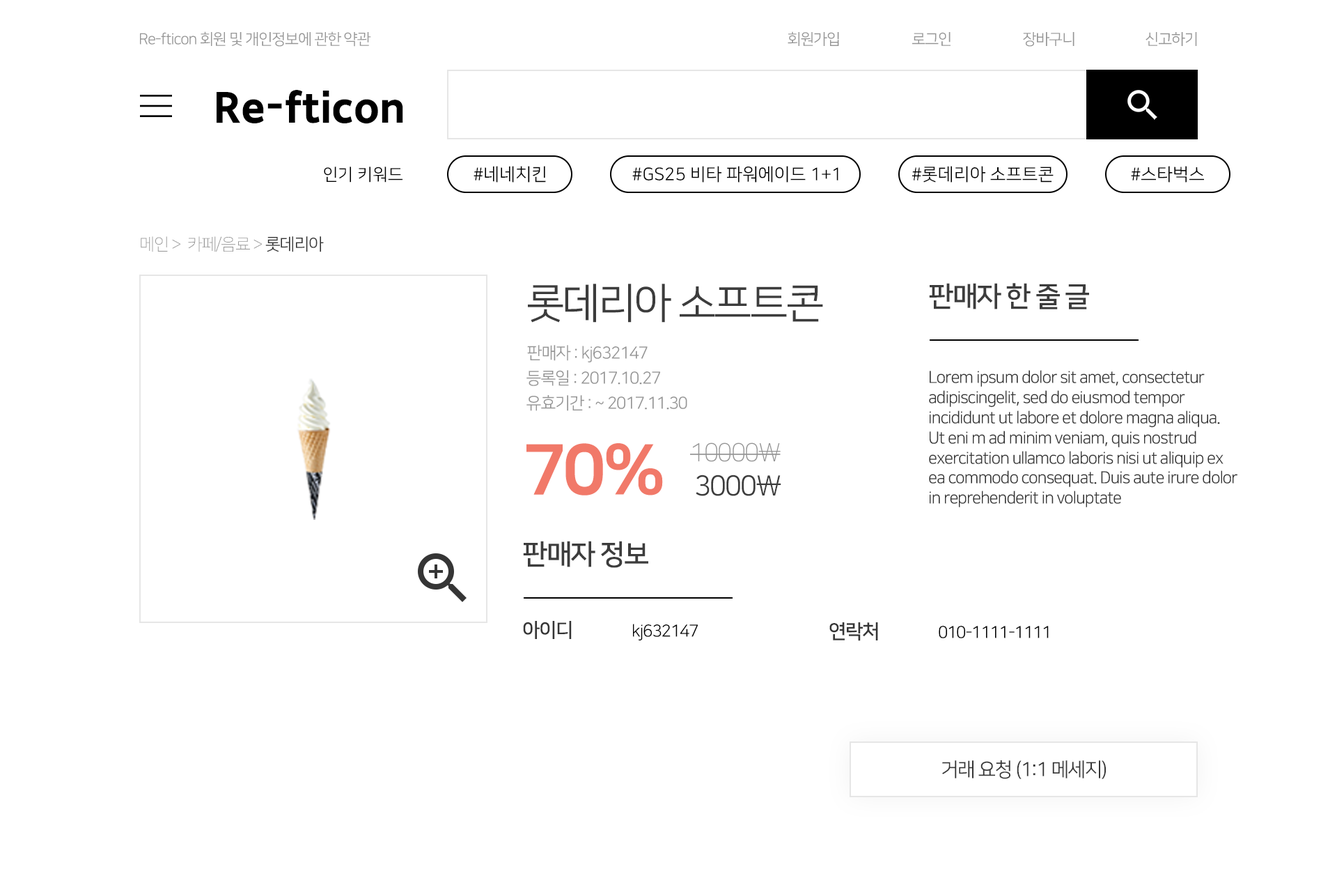
<style>
.page{position:relative;width:1337px;height:892px;background:#ffffff}
.page>*{position:absolute;margin:0}
.t1{font:15.3px "NanumSquareOTFR";letter-spacing:-0.05em;color:#959595}
.t2{font:41.8px "SDGothicNeoc-gExBd";color:#000000}
.t3{font:16.7px "NanumSquareOTFR";color:#000000}
.t4{font:17.6px "NanumSquareOTFR";color:#000000}
.t5{font:16.7px "NanumSquareOTFL";letter-spacing:-0.05em;color:#959595}
.t6{font:16.7px "NanumSquareOTFR";letter-spacing:-0.05em;color:#353535}
.t7{font:41.8px "NanumSquareOTFR";letter-spacing:-0.05em;color:#3c3c3c}
.t8{font:27.9px "NanumSquareOTFB";letter-spacing:-0.05em;color:#3c3c3c}
.t9{font:16.7px "NanumSquareOTFR";letter-spacing:-0.05em;color:#959595}
.t10{font:69.7px "NanumSquareOTFEB";letter-spacing:-0.05em;color:#f17969}
.t11{font:25.1px "NanumSquareOTFL";letter-spacing:-0.05em;color:#959595}
.t12{font:27.9px "NanumSquareOTFR";letter-spacing:-0.05em;color:#3c3c3c}
.t13{font:19.5px "NanumSquareOTFB";letter-spacing:-0.05em;color:#353535}
.t14{font:16.7px "NanumSquareOTFR";letter-spacing:-0.05em;color:#000000}
.t15{font:19.5px "NanumSquareOTFR";letter-spacing:-0.05em;color:#353535}
</style>
<div class="page">
<p class="t1" style="left:140px;top:31px;width:231px;height:16px">Re-fticon 회원 및 개인정보에 관한 약관</p>
<p class="t1" style="left:788px;top:31px;width:51px;height:15px">회원가입</p>
<p class="t1" style="left:912px;top:32px;width:39px;height:14px">로그인</p>
<p class="t1" style="left:1023px;top:32px;width:52px;height:15px">장바구니</p>
<p class="t1" style="left:1146px;top:32px;width:51px;height:14px">신고하기</p>
<p class="t2" style="left:217px;top:90px;width:186px;height:34px">Re-fticon</p>
<p class="t3" style="left:324px;top:166px;width:79px;height:16px">인기 키워드</p>
<p class="t4" style="left:474px;top:166px;width:72px;height:16px">#네네치킨</p>
<p class="t4" style="left:632px;top:166px;width:207px;height:16px">#GS25 비타 파워에이드 1+1</p>
<p class="t4" style="left:912px;top:166px;width:142px;height:16px">#롯데리아 소프트콘</p>
<p class="t4" style="left:1131px;top:166px;width:73px;height:16px">#스타벅스</p>
<p class="t5" style="left:141px;top:236px;width:183px;height:16px">메인 &gt;  카페/음료 &gt; <span class="t6">롯데리아</span></p>
<p class="t7" style="left:528px;top:284px;width:295px;height:39px">롯데리아 소프트콘</p>
<p class="t8" style="left:929px;top:283px;width:160px;height:26px">판매자 한 줄 글</p>
<p class="t9" style="left:527px;top:345px;width:121px;height:17px">판매자 : kj632147</p>
<p class="t9" style="left:527px;top:370px;width:133px;height:16px">등록일 : 2017.10.27</p>
<p class="t6" style="left:929px;top:370px;width:309px;height:137px">Lorem ipsum dolor sit amet, consectetur<br>adipiscingelit, sed do eiusmod tempor<br>incididunt ut labore et dolore magna aliqua.<br>Ut eni m ad minim veniam, quis nostrud<br>exercitation ullamco laboris nisi ut aliquip ex<br>ea commodo consequat. Duis aute irure dolor<br>in reprehenderit in voluptate</p>
<p class="t9" style="left:527px;top:395px;width:161px;height:16px">유효기간 : ~ 2017.11.30</p>
<p class="t10" style="left:527px;top:443px;width:136px;height:52px">70%</p>
<p class="t11" style="left:690px;top:442px;width:91px;height:20px">10000\</p>
<p class="t12" style="left:696px;top:474px;width:86px;height:22px">3000\</p>
<p class="t8" style="left:523px;top:541px;width:126px;height:27px">판매자 정보</p>
<p class="t13" style="left:523px;top:621px;width:49px;height:18px">아이디</p>
<p class="t14" style="left:633px;top:623px;width:65px;height:17px">kj632147</p>
<p class="t13" style="left:830px;top:622px;width:48px;height:19px">연락처</p>
<p class="t14" style="left:939px;top:626px;width:110px;height:12px">010-1111-1111</p>
<p class="t15" style="left:942px;top:760px;width:164px;height:19px">거래 요청 (1:1 메세지)</p>
</div>
